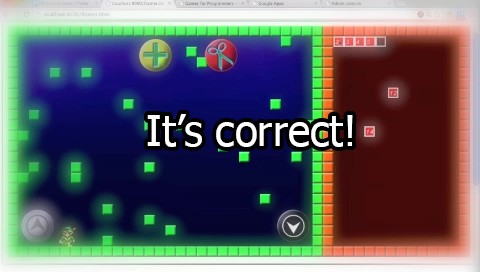
<style>
.page{position:relative;width:480px;height:272px}
.page>*{position:absolute;margin:0}
.t1{font:41.7px "Tahoma";color:#ffffff}
</style>
<div class="page">
<p class="t1" style="left:147px;top:114px;width:206px;height:33px">It’s correct!</p>
</div>
